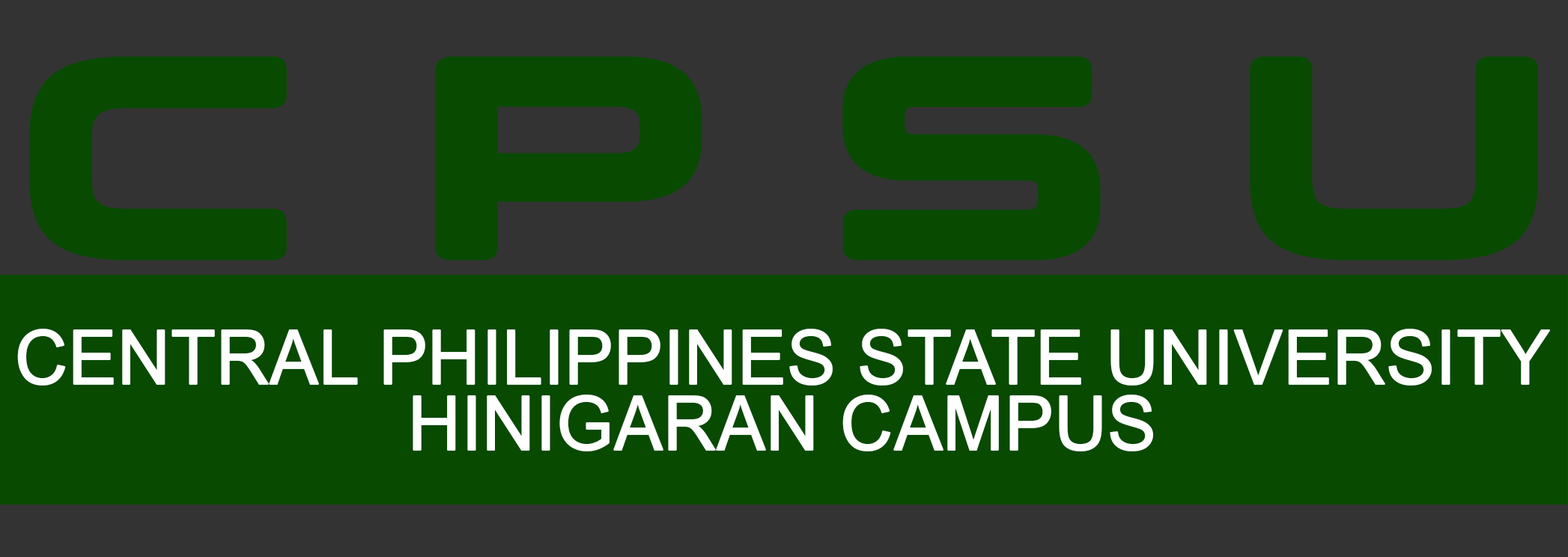
<style>
.page{position:relative;width:1568px;height:557px;background:#074a00}
.page>*{position:absolute;margin:0}
.t1{font:272.6px "ConthraxSb-Regular";letter-spacing:0.36em;color:#074a00;font-weight:bold;scale:1.19 1}
.t2{font:74.8px "ArialNarrow";letter-spacing:-0.02em;color:#ffffff;font-weight:bold;scale:1.19 1}
</style>
<div class="page">
<p class="t1" style="left:34px;top:61px;width:1500px;height:195px">CPSU</p>
<p class="t2" style="left:17px;top:329px;width:1533px;height:123px;text-align:center">CENTRAL PHILIPPINES STATE UNIVERSITY<br>HINIGARAN CAMPUS</p>
</div>
